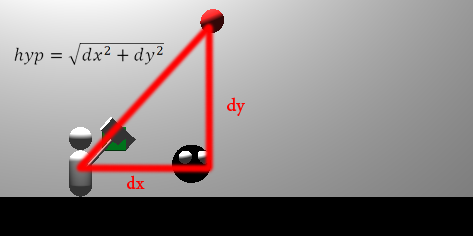
<style>
.page{position:relative;width:473px;height:236px}
.page>*{position:absolute;margin:0}
.t1{font:18px "AdobeHebrew-Regular";color:#ff0000}
</style>
<div class="page">
<p class="t1" style="left:227px;top:97px;width:18px;height:19px">dy</p>
<p class="t1" style="left:127px;top:175px;width:18px;height:14px">dx</p>
</div>
